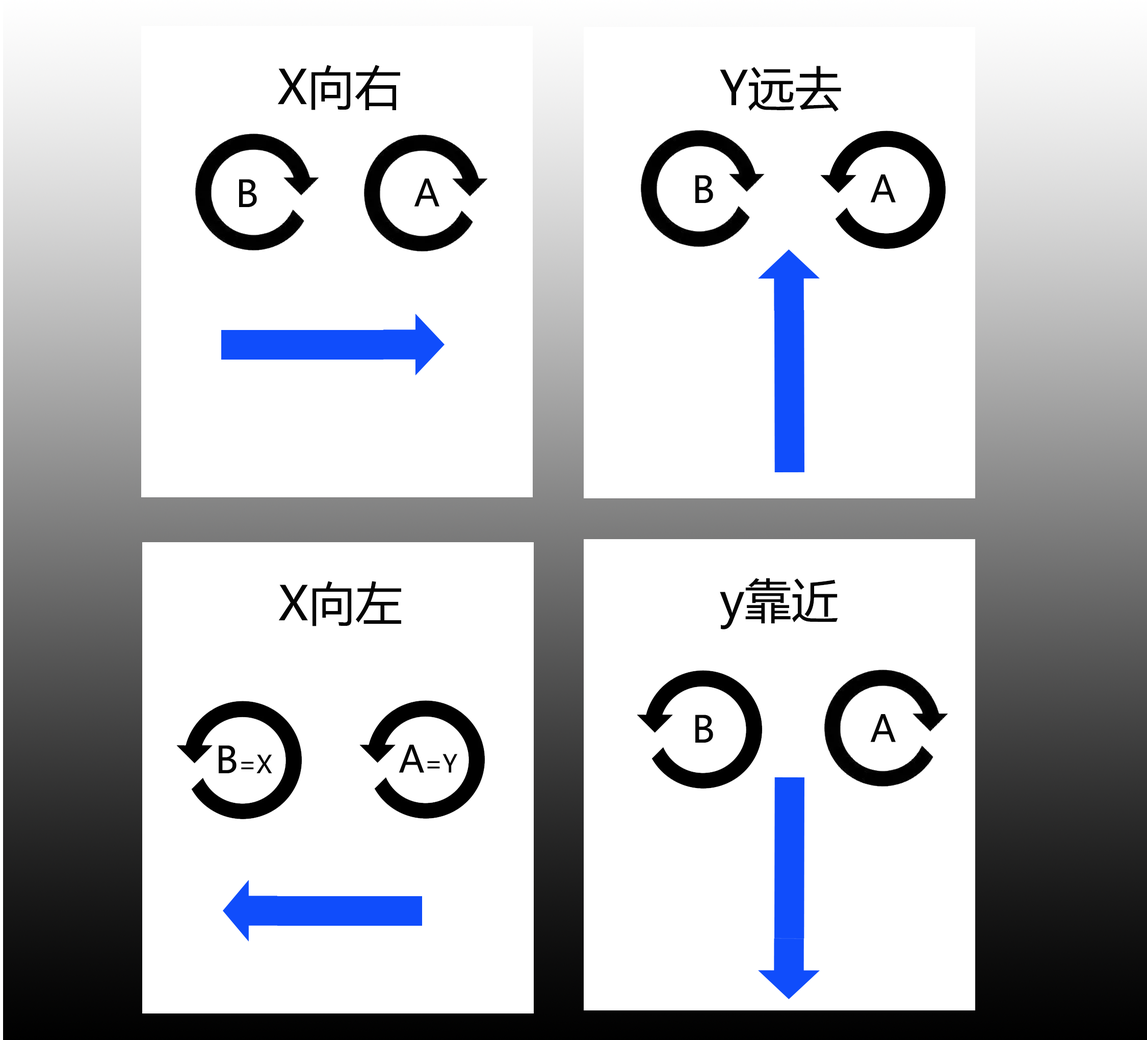
<style>
.page{position:relative;width:1147px;height:1040px;background:#ffffff}
.page>*{position:absolute;margin:0}
.t1{font:46.9px "MicrosoftYaHei";color:#040404}
.t2{font:36.7px "MicrosoftYaHei";color:#040404}
.t3{font:24.5px "MicrosoftYaHei";color:#040404}
</style>
<div class="page">
<p class="t1" style="left:277px;top:65px;width:123px;height:45px">X向右</p>
<p class="t1" style="left:720px;top:66px;width:121px;height:46px">Y远去</p>
<p class="t2" style="left:239px;top:179px;width:18px;height:28px">B</p>
<p class="t2" style="left:414px;top:178px;width:25px;height:28px">A</p>
<p class="t2" style="left:695px;top:175px;width:18px;height:28px">B</p>
<p class="t2" style="left:870px;top:174px;width:26px;height:28px">A</p>
<p class="t1" style="left:278px;top:581px;width:123px;height:45px">X向左</p>
<p class="t1" style="left:720px;top:578px;width:118px;height:51px">y靠近</p>
<p class="t2" style="left:870px;top:714px;width:26px;height:28px">A</p>
<p class="t2" style="left:695px;top:714px;width:18px;height:28px">B</p>
<p class="t3" style="left:219px;top:745px;width:53px;height:28px"><span class="t2">B</span>=X</p>
<p class="t3" style="left:399px;top:744px;width:59px;height:28px"><span class="t2">A</span>=Y</p>
</div>
